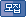
<style>
.page{position:relative;width:26px;height:17px;background:#8a95c4}
.page>*{position:absolute;margin:0}
.t1{font:10px "YDIWebDotum";letter-spacing:-0.075em;color:#ffffff}
</style>
<div class="page">
<p class="t1" style="left:5px;top:4px;width:15px;height:9px">모집</p>
</div>
